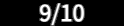
<style>
.page{position:relative;width:124px;height:26px;background:#000000}
.page>*{position:absolute;margin:0}
.t1{font:22px "WebPSD-18463539-0-Regular";color:#ffffff;font-weight:bold}
</style>
<div class="page">
<p class="t1" style="left:0px;top:0px;width:124px;height:26px">9/10</p>
</div>
